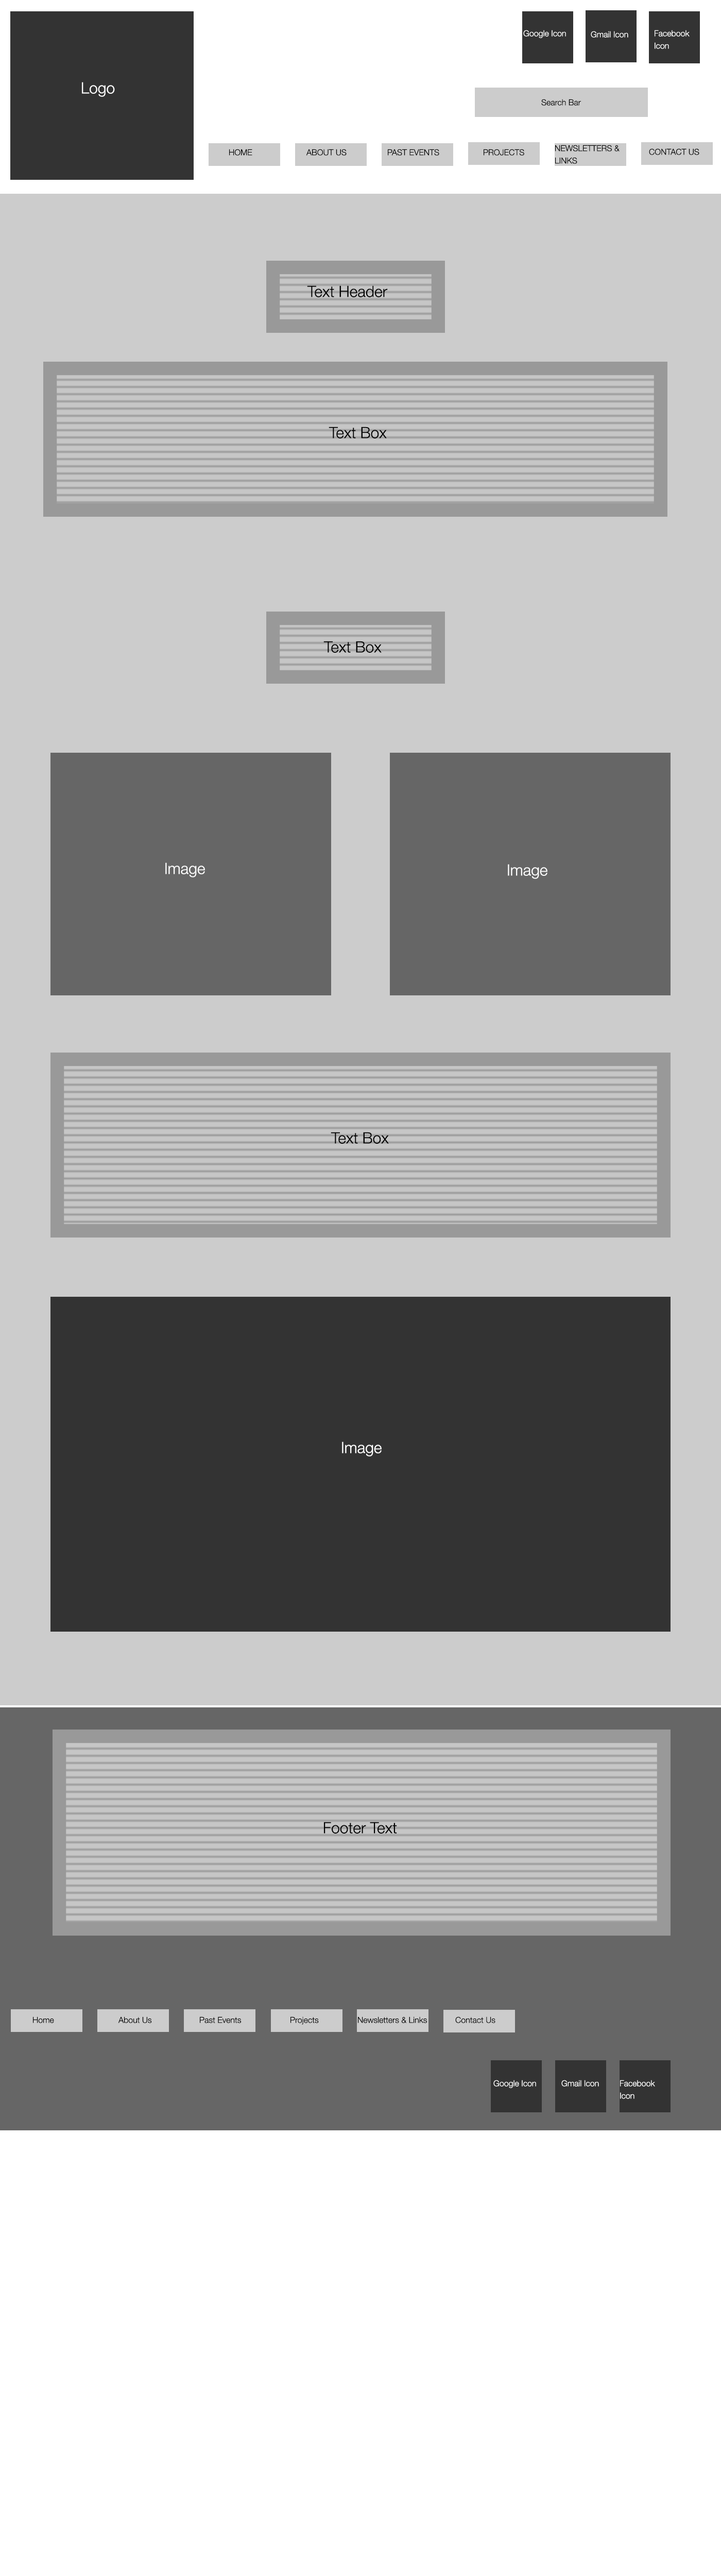
<style>
.page{position:relative;width:721px;height:2576px;background:#cccccc}
.page>*{position:absolute;margin:0}
.t1{font:8.2px "HelveticaNeue-Light";color:#ffffff}
.t2{font:8.2px/12.4px "HelveticaNeue-Light";color:#ffffff}
.t3{font:15.5px "HelveticaNeue-Light";color:#ffffff}
.t4{font:8.2px "HelveticaNeue-Light";color:#000000}
.t5{font:8.2px/12.4px "HelveticaNeue-Light";color:#000000}
.t6{font:15.5px "HelveticaNeue-Light";color:#000000}
.t7{font:15.5px "HelveticaNeue-Light";color:#fefefe}
</style>
<div class="page">
<p class="t1" style="left:523px;top:30px;width:43px;height:8px">Google Icon</p>
<p class="t2" style="left:655px;top:30px;width:35px;height:19px">Facebook Icon</p>
<p class="t1" style="left:591px;top:31px;width:38px;height:7px">Gmail Icon</p>
<p class="t3" style="left:82px;top:82px;width:33px;height:15px">Logo</p>
<p class="t4" style="left:541px;top:99px;width:40px;height:7px">Search Bar</p>
<p class="t4" style="left:229px;top:149px;width:23px;height:7px">HOME</p>
<p class="t4" style="left:306px;top:149px;width:41px;height:7px">ABOUT US</p>
<p class="t4" style="left:388px;top:149px;width:51px;height:7px">PAST EVENTS</p>
<p class="t4" style="left:484px;top:149px;width:40px;height:7px">PROJECTS</p>
<p class="t5" style="left:555px;top:145px;width:65px;height:19px">NEWSLETTERS &amp; LINKS</p>
<p class="t4" style="left:649px;top:148px;width:51px;height:7px">CONTACT US</p>
<p class="t6" style="left:307px;top:285px;width:81px;height:12px">Text Header</p>
<p class="t6" style="left:329px;top:427px;width:58px;height:11px">Text Box</p>
<p class="t6" style="left:324px;top:641px;width:58px;height:12px">Text Box</p>
<p class="t7" style="left:165px;top:862px;width:40px;height:15px">Image</p>
<p class="t7" style="left:508px;top:864px;width:40px;height:15px">Image</p>
<p class="t6" style="left:331px;top:1132px;width:58px;height:12px">Text Box</p>
<p class="t3" style="left:342px;top:1442px;width:40px;height:14px">Image</p>
<p class="t6" style="left:324px;top:1822px;width:73px;height:12px">Footer Text</p>
<p class="t4" style="left:33px;top:2016px;width:21px;height:7px">Home</p>
<p class="t4" style="left:118px;top:2016px;width:34px;height:7px">About Us</p>
<p class="t4" style="left:200px;top:2016px;width:41px;height:7px">Past Events</p>
<p class="t4" style="left:291px;top:2016px;width:28px;height:9px">Projects</p>
<p class="t4" style="left:358px;top:2016px;width:69px;height:7px">Newsletters &amp; Links</p>
<p class="t4" style="left:455px;top:2016px;width:41px;height:7px">Contact Us</p>
<p class="t1" style="left:494px;top:2080px;width:42px;height:8px">Google Icon</p>
<p class="t1" style="left:562px;top:2080px;width:37px;height:7px">Gmail Icon</p>
<p class="t2" style="left:620px;top:2080px;width:35px;height:19px">Facebook Icon</p>
</div>
